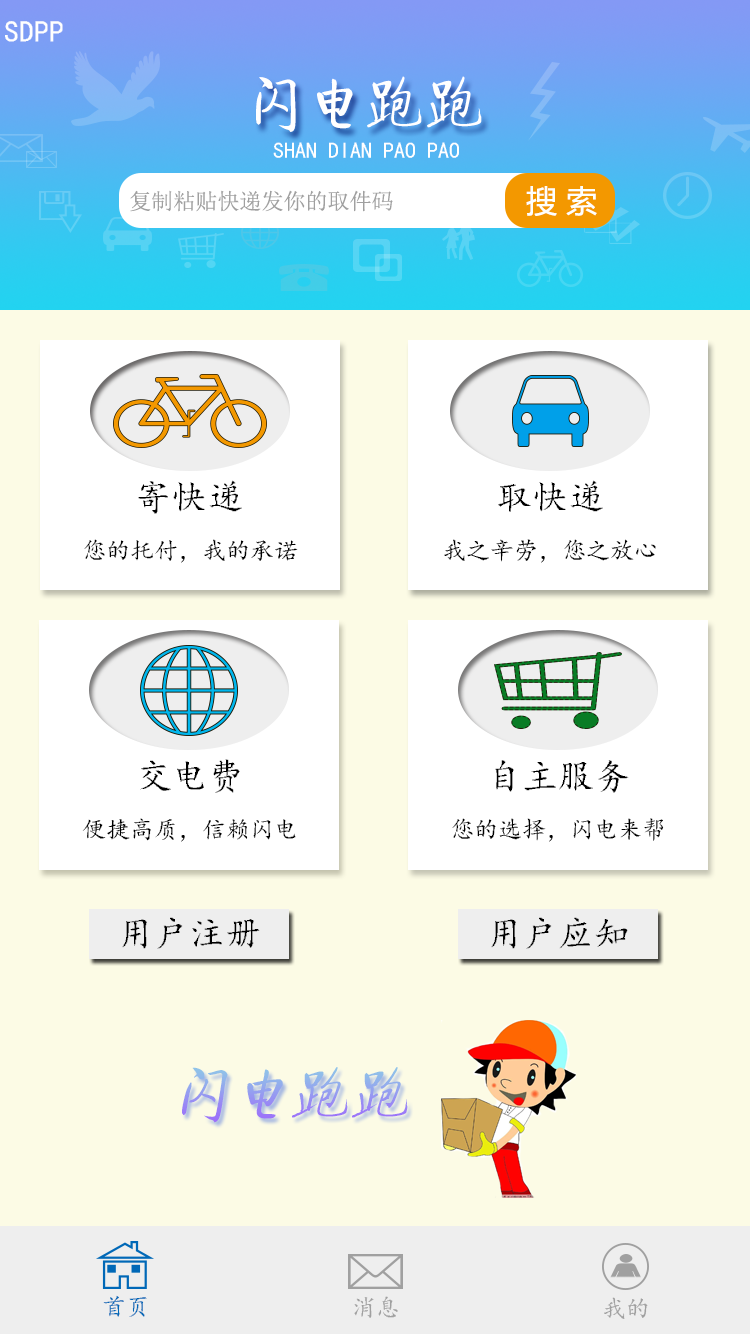
<style>
.page{position:relative;width:750px;height:1334px;background:#fcfbe5}
.page>*{position:absolute;margin:0}
.t1{font:30px "¿¬Ìå";color:#fffffe;text-transform:uppercase}
.t2{font:60px "JQiTi";color:#ffffff;text-transform:uppercase}
.t3{font:22px "¿¬Ìå";color:#ffffff;text-transform:uppercase}
.t4{font:22px "SimSun";color:#a0a0a0;text-transform:uppercase}
.t5{font:30.8px "MicrosoftYaHei";color:#fefffb;text-transform:uppercase}
.t6{font:36px "¿¬Ìå";color:#000000;text-transform:uppercase}
.t7{font:24px "¿¬Ìå";color:#000000;text-transform:uppercase}
.t8{font:60px "JQiTi";text-transform:uppercase;font-style:italic}
.t9{font:24px "¿¬Ìå";color:#0068b7;text-transform:uppercase}
.t10{font:24px "¿¬Ìå";color:#a0a0a0;text-transform:uppercase}
</style>
<div class="page">
<p class="t1" style="left:5px;top:21px;width:58px;height:21px">sdpp</p>
<p class="t2" style="left:256px;top:76px;width:226px;height:56px">闪电跑跑</p>
<p class="t3" style="left:273px;top:142px;width:186px;height:16px">SHAN DIAN PAO PAO</p>
<p class="t4" style="left:130px;top:190px;width:263px;height:22px">复制粘贴快递发你的取件码</p>
<p class="t5" style="left:526px;top:186px;width:71px;height:30px">搜 索</p>
<p class="t6" style="left:138px;top:480px;width:104px;height:34px">寄快递</p>
<p class="t6" style="left:498px;top:480px;width:105px;height:32px">取快递</p>
<p class="t7" style="left:84px;top:539px;width:214px;height:24px">您的托付，我的承诺</p>
<p class="t7" style="left:444px;top:539px;width:212px;height:24px">我之辛劳，您之放心</p>
<p class="t6" style="left:140px;top:759px;width:100px;height:34px">交电费</p>
<p class="t6" style="left:495px;top:760px;width:134px;height:33px">自主服务</p>
<p class="t7" style="left:82px;top:818px;width:214px;height:24px">便捷高质，信赖闪电</p>
<p class="t7" style="left:452px;top:818px;width:212px;height:24px">您的选择，闪电来帮</p>
<p class="t6" style="left:122px;top:917px;width:138px;height:32px">用户注册</p>
<p class="t6" style="left:491px;top:917px;width:137px;height:32px">用户应知</p>
<p class="t8" style="left:182px;top:1067px;width:226px;height:56px">闪电跑跑</p>
<p class="t9" style="left:103px;top:1295px;width:44px;height:22px">首页</p>
<p class="t10" style="left:354px;top:1296px;width:44px;height:22px">消息</p>
<p class="t10" style="left:604px;top:1297px;width:44px;height:22px">我的</p>
</div>
